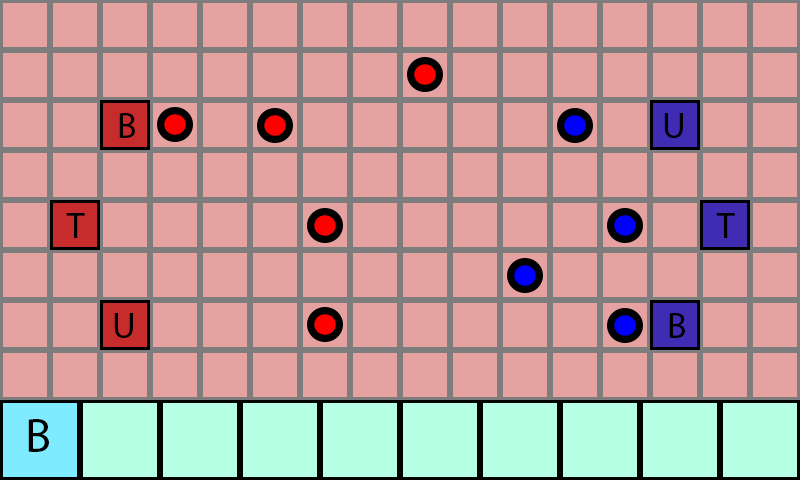
<style>
.page{position:relative;width:800px;height:480px;background:#e6a1a1}
.page>*{position:absolute;margin:0}
.t1{font:36px "MyriadPro-Regular";color:#000000}
.t2{font:48px "MyriadPro-Regular";color:#000000}
</style>
<div class="page">
<p class="t1" style="left:119px;top:113px;width:16px;height:25px">B</p>
<p class="t1" style="left:664px;top:113px;width:19px;height:25px">U</p>
<p class="t1" style="left:66px;top:213px;width:19px;height:25px">T</p>
<p class="t1" style="left:716px;top:213px;width:19px;height:25px">T</p>
<p class="t1" style="left:114px;top:313px;width:19px;height:25px">U</p>
<p class="t1" style="left:669px;top:313px;width:16px;height:25px">B</p>
<p class="t2" style="left:28px;top:419px;width:21px;height:33px">B</p>
</div>
